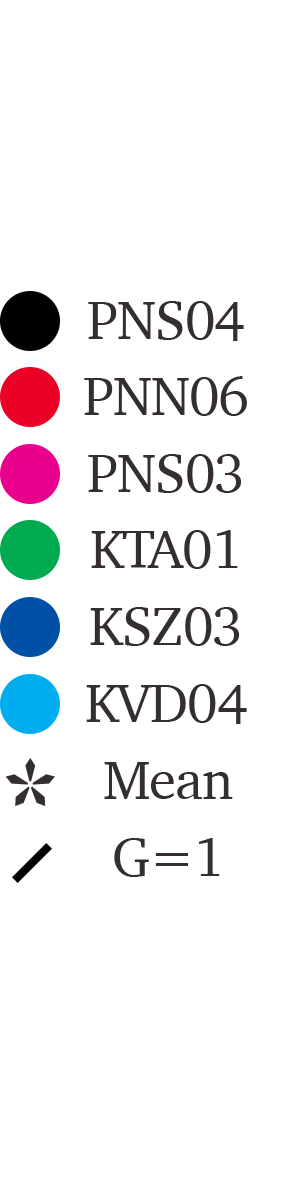
<style>
.page{position:relative;width:300px;height:1200px;background:#ffffff}
.page>*{position:absolute;margin:0}
.t1{font:55.1px "Charter-Roman";letter-spacing:-0.02em;color:#352e31}
.t2{font:125px "Charter-Roman";letter-spacing:-0.02em;color:#352e31}
</style>
<div class="page">
<p class="t1" style="left:88px;top:301px;width:156px;height:40px">PNS04</p>
<p class="t1" style="left:84px;top:376px;width:163px;height:40px">PNN06</p>
<p class="t1" style="left:88px;top:454px;width:154px;height:39px">PNS03</p>
<p class="t1" style="left:91px;top:530px;width:147px;height:39px">KTA01</p>
<p class="t1" style="left:90px;top:607px;width:150px;height:39px">KSZ03</p>
<p class="t1" style="left:86px;top:684px;width:161px;height:40px">KVD04</p>
<p class="t2" style="left:5px;top:758px;width:50px;height:48px">*</p>
<p class="t1" style="left:104px;top:762px;width:129px;height:37px">Mean</p>
<p class="t1" style="left:114px;top:838px;width:106px;height:39px">G=1</p>
</div>
